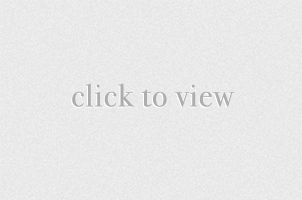
<style>
.page{position:relative;width:302px;height:200px}
.page>*{position:absolute;margin:0}
.t1{font:32px "BodoniSvtyTwoOSITCTTBook";letter-spacing:0.04em;color:#adadad}
</style>
<div class="page">
<p class="t1" style="left:72px;top:83px;width:163px;height:24px">click to view</p>
</div>
